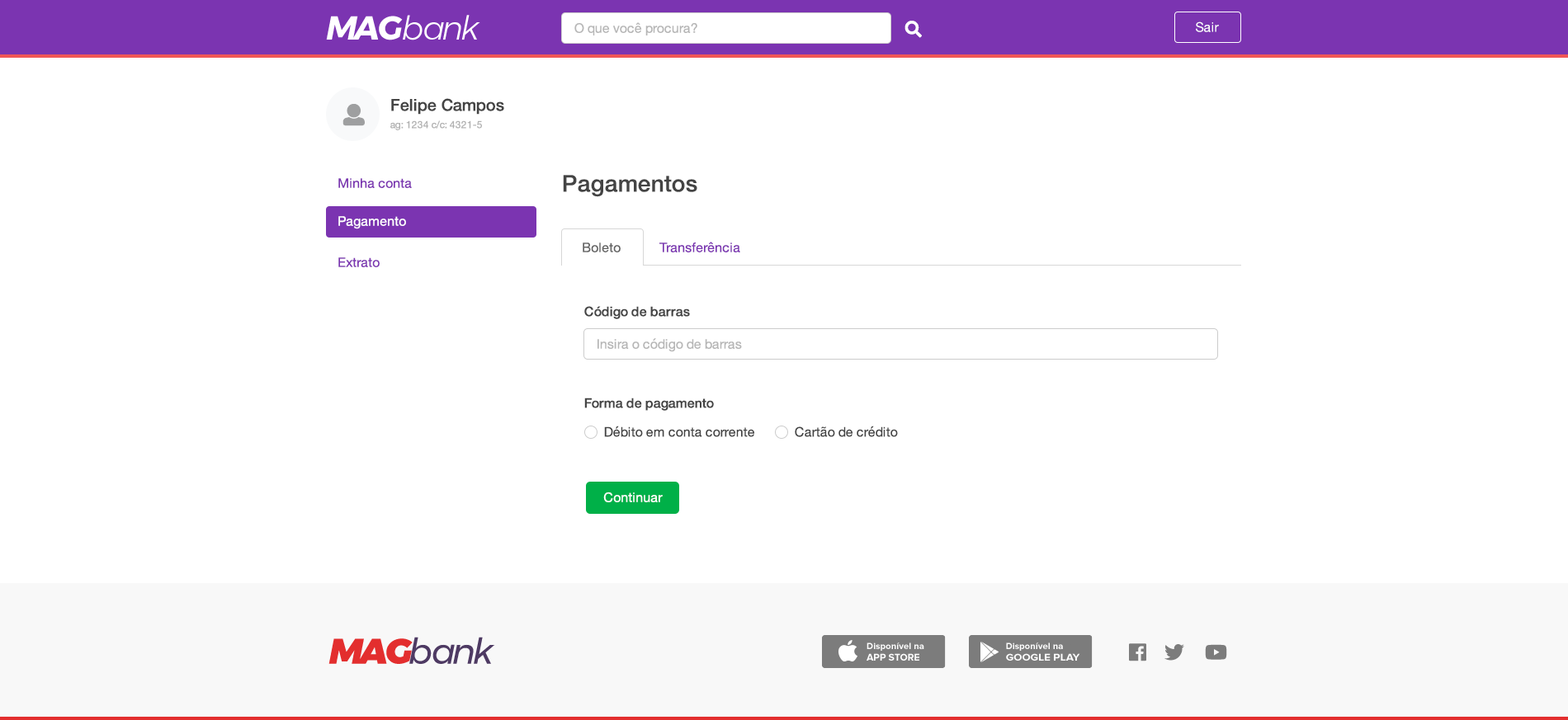
<style>
.page{position:relative;width:1568px;height:720px;background:#ffffff}
.page>*{position:absolute;margin:0}
.t1{font:33px "Montserrat-LightItalic";letter-spacing:-0.075em;color:#ffffff}
.t2{font:33px "Montserrat-BoldItalic";letter-spacing:-0.075em;color:#ffffff}
.t3{font:13.2px "HelveticaNeue";color:#b6b6b6}
.t4{font:13.2px "HelveticaNeue";color:#ffffff}
.t5{font:16.5px "HelveticaNeue-Medium";color:#444444}
.t6{font:9.9px "HelveticaNeue";color:#b1b1b1}
.t7{font:13.2px "HelveticaNeue";color:#7b34b1}
.t8{font:23.1px "HelveticaNeue-Medium";color:#444444}
.t9{font:13.2px "HelveticaNeue";color:#626262}
.t10{font:13.2px "HelveticaNeue-Medium";color:#444444}
.t11{font:13.2px "HelveticaNeue";color:#444444}
.t12{font:35.8px "Montserrat-Italic";letter-spacing:-0.075em;color:#4e3a63}
.t13{font:35.8px "Montserrat-BlackItalic";letter-spacing:-0.075em;color:#e32e2e}
</style>
<div class="page">
<p class="t1" style="left:326px;top:15px;width:154px;height:25px"><span class="t2">MAG</span>bank</p>
<p class="t3" style="left:574px;top:22px;width:123px;height:13px">O que você procura?</p>
<p class="t4" style="left:1196px;top:21px;width:23px;height:11px">Sair</p>
<p class="t5" style="left:391px;top:98px;width:113px;height:17px">Felipe Campos</p>
<p class="t6" style="left:390px;top:120px;width:92px;height:10px">ag: 1234 c/c: 4321-5</p>
<p class="t7" style="left:338px;top:178px;width:74px;height:10px">Minha conta</p>
<p class="t8" style="left:563px;top:175px;width:134px;height:22px">Pagamentos</p>
<p class="t4" style="left:338px;top:216px;width:68px;height:13px">Pagamento</p>
<p class="t9" style="left:583px;top:243px;width:38px;height:10px">Boleto</p>
<p class="t7" style="left:659px;top:242px;width:81px;height:11px">Transferência</p>
<p class="t7" style="left:338px;top:257px;width:42px;height:10px">Extrato</p>
<p class="t10" style="left:584px;top:306px;width:106px;height:13px">Código de barras</p>
<p class="t3" style="left:597px;top:338px;width:145px;height:14px">Insira o código de barras</p>
<p class="t10" style="left:584px;top:398px;width:130px;height:13px">Forma de pagamento</p>
<p class="t11" style="left:604px;top:426px;width:150px;height:11px">Débito em conta corrente</p>
<p class="t11" style="left:795px;top:426px;width:103px;height:11px">Cartão de crédito</p>
<p class="t4" style="left:603px;top:492px;width:60px;height:11px">Continuar</p>
<p class="t12" style="left:328px;top:637px;width:167px;height:27px"><span class="t13">MAG</span>bank</p>
</div>
